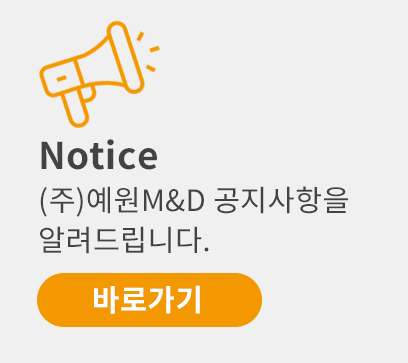
<style>
.page{position:relative;width:408px;height:363px;background:#f0f0f0}
.page>*{position:absolute;margin:0}
.t1{font:29.4px/42px "NotoSansCJKkr-Regular";letter-spacing:0.01em;color:#434343}
.t2{font:36.7px/37.2px "NotoSansCJKkr-Bold";letter-spacing:0.01em;color:#434343}
.t3{font:29.4px/39.9px "NotoSansCJKkr-Regular";letter-spacing:0.01em;color:#434343}
.t4{font:30px "NotoSansCJKkr-Bold";letter-spacing:0.01em;color:#ffffff}
</style>
<div class="page">
<p class="t1" style="left:40px;top:139px;width:308px;height:115px"><span class="t2">Notice<br></span>(주)예원M&amp;D 공지사항을 <br><span class="t3">알려드립니다.</span></p>
<p class="t4" style="left:94px;top:285px;width:106px;height:29px">바로가기</p>
</div>
